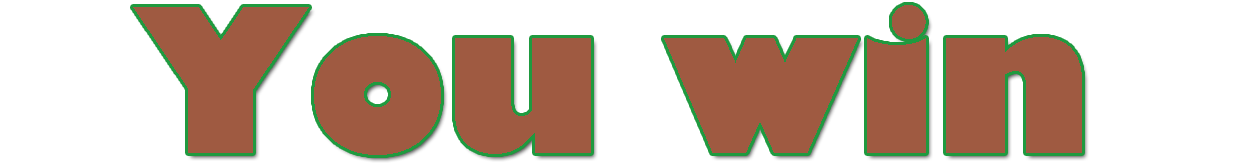
<style>
.page{position:relative;width:1240px;height:164px;background:#ffffff}
.page>*{position:absolute;margin:0}
.t1{font:195.6px "GillSans-UltraBold";letter-spacing:-0.01em;color:#9f5a41}
</style>
<div class="page">
<p class="t1" style="left:133px;top:5px;width:949px;height:150px">You win</p>
</div>
